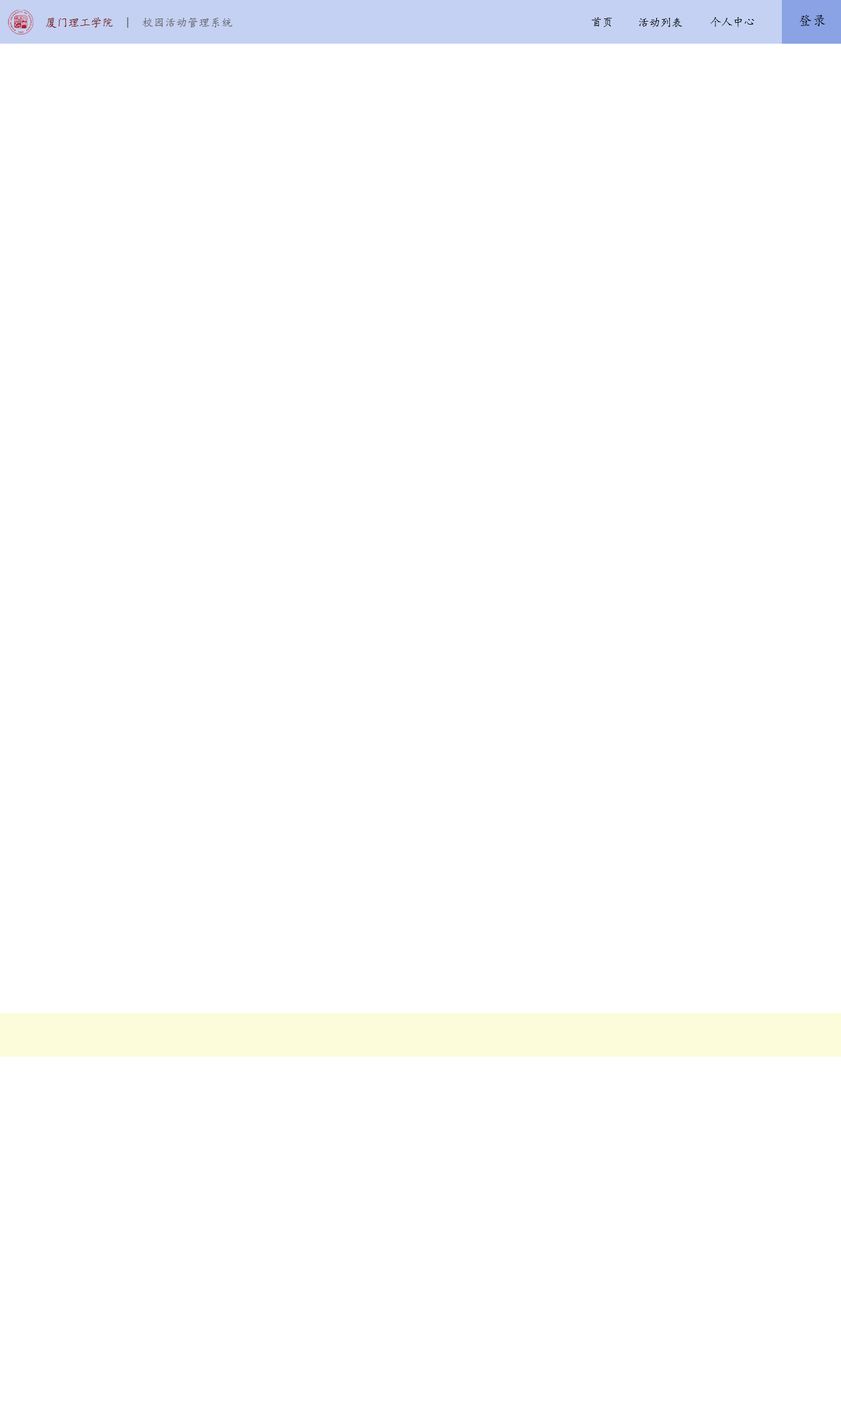
<style>
.page{position:relative;width:841px;height:1418px;background:#ffffff}
.page>*{position:absolute;margin:0}
.t1{font:11.1px "KaiTi";letter-spacing:0.02em;color:#626266}
.t2{font:11.1px "KaiTi";letter-spacing:0.02em;color:#771515}
.t3{font:11.1px "KaiTi";letter-spacing:0.02em;color:#000000}
.t4{font:11.1px "KaiTi";letter-spacing:0.02em;color:#010101}
.t5{font:13.4px "KaiTi";letter-spacing:0.02em;color:#010101}
</style>
<div class="page">
<p class="t1" style="left:46px;top:17px;width:186px;height:11px"><span class="t2">厦门理工学院</span>  |  校园活动管理系统</p>
<p class="t3" style="left:592px;top:17px;width:20px;height:10px">首页</p>
<p class="t4" style="left:639px;top:18px;width:43px;height:9px">活动列表</p>
<p class="t4" style="left:710px;top:17px;width:44px;height:10px">个人中心</p>
<p class="t5" style="left:799px;top:15px;width:26px;height:11px">登录</p>
</div>
